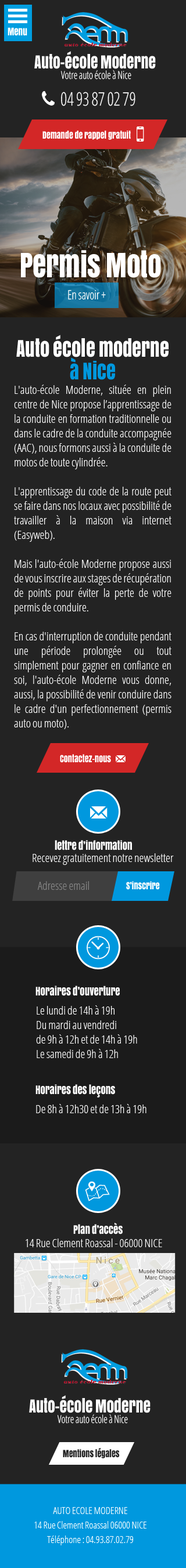
<style>
.page{position:relative;width:186px;height:1568px;background:#232323}
.page>*{position:absolute;margin:0}
.t1{font:9.9px "Anton";color:#ffffff;scale:0.88 1}
.t2{font:16.8px "Anton";color:#ffffff;scale:0.88 1}
.t3{font:11px "OpenSans-CondensedLight";color:#ffffff;scale:0.88 1}
.t4{font:18.6px "icone";color:#ffffff;scale:0.88 1}
.t5{font:18.6px "OpenSans-CondensedLight";color:#ffffff;scale:0.88 1}
.t6{font:9.3px "Anton";color:#ffffff;scale:0.88 1}
.t7{font:17.4px "icone";color:#ffffff;scale:0.88 1}
.t8{font:31.3px "Anton";color:#ffffff;scale:0.88 1}
.t9{font:12.8px "OpenSans-CondensedLight";color:#ffffff;scale:0.88 1}
.t10{font:11.6px/14.5px "OpenSans-CondensedLight";color:#ffffff}
.t11{font:21.5px/22.6px "Anton";color:#ffffff;scale:0.88 1}
.t12{font:21.5px/22.6px "Anton";color:#0098de;scale:0.88 1}
.t13{font:11px "icone";color:#ffffff}
.t14{font:19.1px "icone";color:#ffffff}
.t15{font:11px "Anton";color:#ffffff;scale:0.88 1}
.t16{font:11.6px "OpenSans-CondensedLight";color:#ffffff}
.t17{font:11.6px "OpenSans-CondensedLight";color:#868686}
.t18{font:9.3px "Anton";color:#232323;scale:0.88 1}
.t19{font:9.9px/14.5px "OpenSans-CondensedLight";color:#ffffff}
</style>
<div class="page">
<p class="t1" style="left:8px;top:27px;width:19px;height:9px">Menu</p>
<p class="t2" style="left:34px;top:51px;width:121px;height:18px">Auto-école Moderne</p>
<p class="t3" style="left:60px;top:70px;width:71px;height:9px">Votre auto école à Nice</p>
<p class="t4" style="left:42px;top:91px;width:13px;height:15px">z</p>
<p class="t5" style="left:61px;top:92px;width:74px;height:14px">04 93 87 02 79</p>
<p class="t6" style="left:42px;top:131px;width:89px;height:9px">Demande de rappel gratuit</p>
<p class="t7" style="left:136px;top:126px;width:8px;height:16px">r</p>
<p class="t8" style="left:21px;top:250px;width:140px;height:28px">Permis Moto</p>
<p class="t9" style="left:68px;top:290px;width:38px;height:10px">En savoir +</p>
<p class="t10" style="left:14px;top:335px;width:157px;height:394px;text-align:center"><span class="t11">Auto école moderne </span><span class="t12">à Nice<br></span>L'auto-école Moderne, située en plein centre de Nice propose l’apprentissage de la conduite en formation traditionnelle ou dans le cadre de la conduite accompagnée (AAC), nous formons aussi à la conduite de motos de toute cylindrée.<br><br>L'apprentissage du code de la route peut se faire dans nos locaux avec possibilité de travailler à la maison via internet (Easyweb).<br><br>Mais l'auto-école Moderne propose aussi de vous inscrire aux stages de récupération de points pour éviter la perte de votre permis de conduire.<br><br>En cas d'interruption de conduite pendant une période prolongée ou tout simplement pour gagner en confiance en soi, l'auto-école Moderne vous donne, aussi, la possibilité de venir conduire dans le cadre d'un perfectionnement (permis auto ou moto).</p>
<p class="t6" style="left:60px;top:754px;width:51px;height:9px">Contactez-nous</p>
<p class="t13" style="left:115px;top:755px;width:10px;height:7px">e</p>
<p class="t14" style="left:90px;top:806px;width:17px;height:13px">e</p>
<p class="t15" style="left:55px;top:840px;width:77px;height:10px">lettre d’information</p>
<p class="t16" style="left:32px;top:853px;width:141px;height:12px">Recevez gratuitement notre newsletter</p>
<p class="t17" style="left:37px;top:881px;width:52px;height:9px">Adresse email</p>
<p class="t6" style="left:126px;top:881px;width:34px;height:9px">S’inscrire</p>
<p class="t15" style="left:35px;top:986px;width:84px;height:10px">Horaires d’ouverture</p>
<p class="t10" style="left:36px;top:1005px;width:101px;height:53px">Le lundi de 14h à 19h<br>Du mardi au vendredi <br>de 9h à 12h et de 14h à 19h<br>Le samedi de 9h à 12h</p>
<p class="t15" style="left:35px;top:1084px;width:80px;height:14px">Horaires des leçons</p>
<p class="t16" style="left:36px;top:1104px;width:110px;height:9px">De 8h à 12h30 et de 13h à 19h</p>
<p class="t15" style="left:73px;top:1222px;width:49px;height:12px">Plan d’accès</p>
<p class="t16" style="left:26px;top:1239px;width:136px;height:8px">14 Rue Clement Roassal - 06000 NICE</p>
<p class="t2" style="left:29px;top:1395px;width:121px;height:18px">Auto-école Moderne</p>
<p class="t3" style="left:57px;top:1414px;width:71px;height:10px">Votre auto école à Nice</p>
<p class="t18" style="left:63px;top:1448px;width:56px;height:10px">Mentions légales</p>
<p class="t19" style="left:34px;top:1507px;width:112px;height:38px;text-align:center">AUTO ECOLE MODERNE<br>14 Rue Clement Roassal 06000 NICE<br>Téléphone : 04.93.87.02.79</p>
</div>
